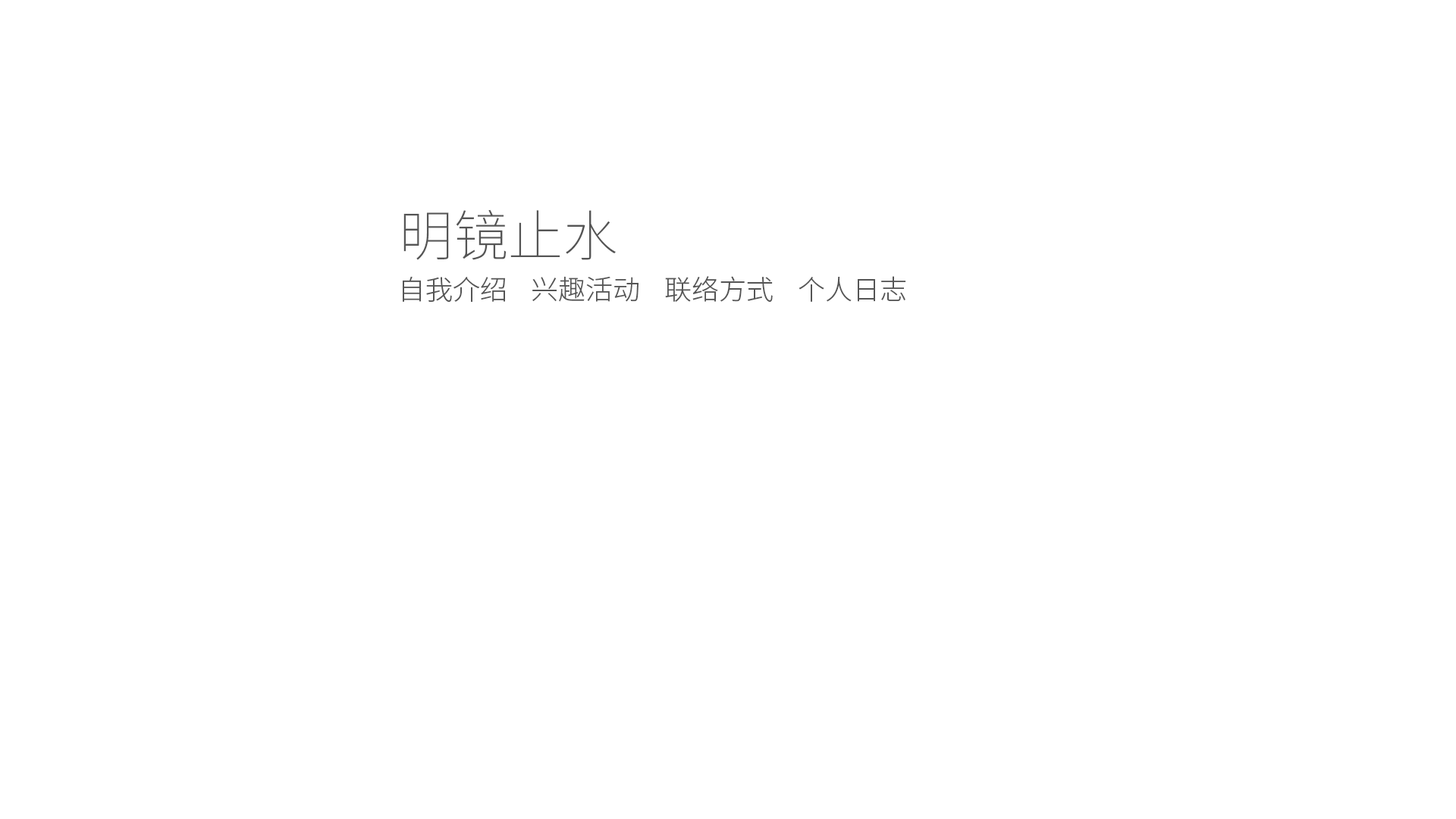
<style>
.page{position:relative;width:1456px;height:819px;background:#ffffff}
.page>*{position:absolute;margin:0}
.t1{font:54.6px "SourceHanSansCN-ExtraLight";color:#555555}
.t2{font:27.3px "SourceHanSansCN-Light";color:#555555}
</style>
<div class="page">
<p class="t1" style="left:403px;top:209px;width:213px;height:51px">明镜止水</p>
<p class="t2" style="left:403px;top:276px;width:503px;height:26px">自我介绍    兴趣活动    联络方式    个人日志</p>
</div>
